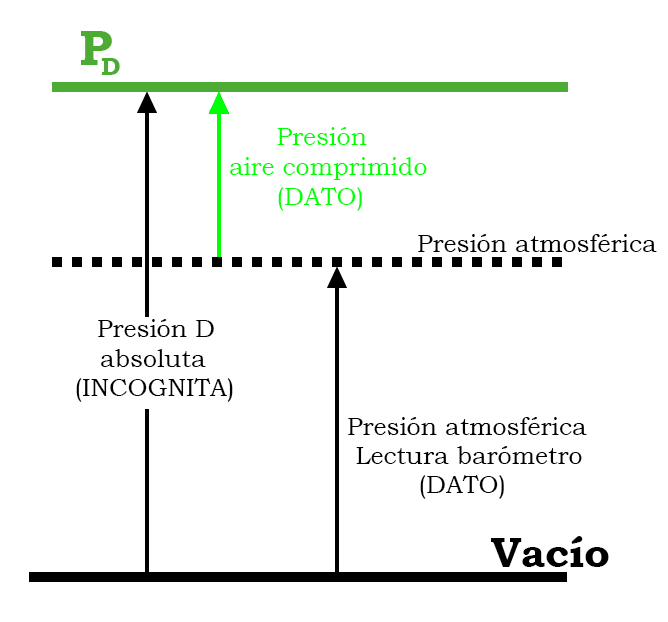
<style>
.page{position:relative;width:668px;height:622px;background:#ffffff}
.page>*{position:absolute;margin:0}
.t1{font:50px "BookmanOldStyle-Bold";color:#4dab34}
.t2{font:25px "BookmanOldStyle-Bold";color:#4dab34}
.t3{font:25px "BookmanOldStyle";color:#00ff02}
.t4{font:25px "BookmanOldStyle";color:#000000}
.t5{font:41.7px "BookmanOldStyle-Bold";color:#000000}
</style>
<div class="page">
<p class="t1" style="left:81px;top:31px;width:31px;height:34px">P</p>
<p class="t2" style="left:101px;top:58px;width:19px;height:17px">D</p>
<p class="t3" style="left:230px;top:127px;width:197px;height:84px">Presión <br>aire comprimido<br>      (DATO)</p>
<p class="t4" style="left:418px;top:234px;width:239px;height:18px">Presión atmosférica</p>
<p class="t4" style="left:98px;top:319px;width:116px;height:48px">Presión D <br>              absoluta</p>
<p class="t4" style="left:76px;top:378px;width:157px;height:24px">(INCOGNITA)</p>
<p class="t4" style="left:348px;top:417px;width:239px;height:18px">Presión atmosférica</p>
<p class="t4" style="left:356px;top:446px;width:226px;height:18px">Lectura barómetro</p>
<p class="t4" style="left:420px;top:475px;width:84px;height:24px">(DATO)</p>
<p class="t5" style="left:491px;top:536px;width:118px;height:31px">Vacío</p>
</div>
